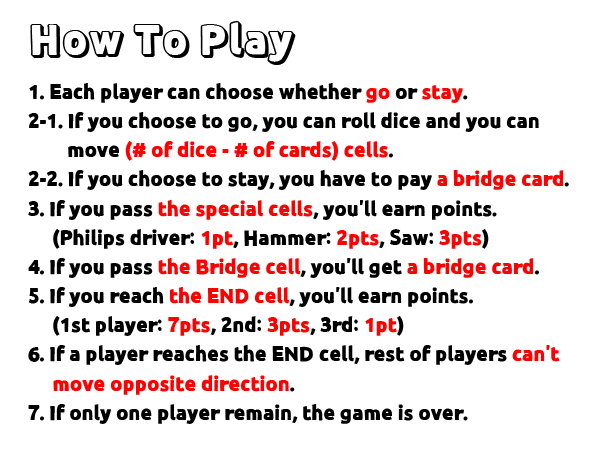
<style>
.page{position:relative;width:600px;height:450px;background:#ffffff}
.page>*{position:absolute;margin:0}
.t1{font:41.7px "Cafe24Decoshadow";color:#000000}
.t2{font:20.8px/29.2px "Cafe24Decobox";color:#000000}
.t3{font:20.8px/29.2px "Cafe24Decobox";color:#ff0000}
</style>
<div class="page">
<p class="t1" style="left:30px;top:20px;width:266px;height:45px">How To Play</p>
<p class="t2" style="left:28px;top:83px;width:541px;height:341px">1. Each player can choose whether <span class="t3">go</span> or <span class="t3">stay</span>.<br>2-1. If you choose to go, you can roll dice and you can<br>        move <span class="t3">(# of dice - # of cards) cells</span>.<br>2-2. If you choose to stay, you have to pay <span class="t3">a bridge card</span>.<br>3. If you pass <span class="t3">the special cells</span>, you'll earn points.<br>     (Philips driver: <span class="t3">1pt</span>, Hammer: <span class="t3">2pts</span>, Saw: <span class="t3">3pts</span>)<br>4. If you pass <span class="t3">the Bridge cell</span>, you'll get <span class="t3">a bridge card</span>.<br>5. If you reach <span class="t3">the END cell</span>, you'll earn points.<br>     (1st player: <span class="t3">7pts</span>, 2nd: <span class="t3">3pts</span>, 3rd: <span class="t3">1pt</span>)<br>6. If a player reaches the END cell, rest of players <span class="t3">can't<br>     move opposite direction</span>.<br>7. If only one player remain, the game is over.</p>
</div>
